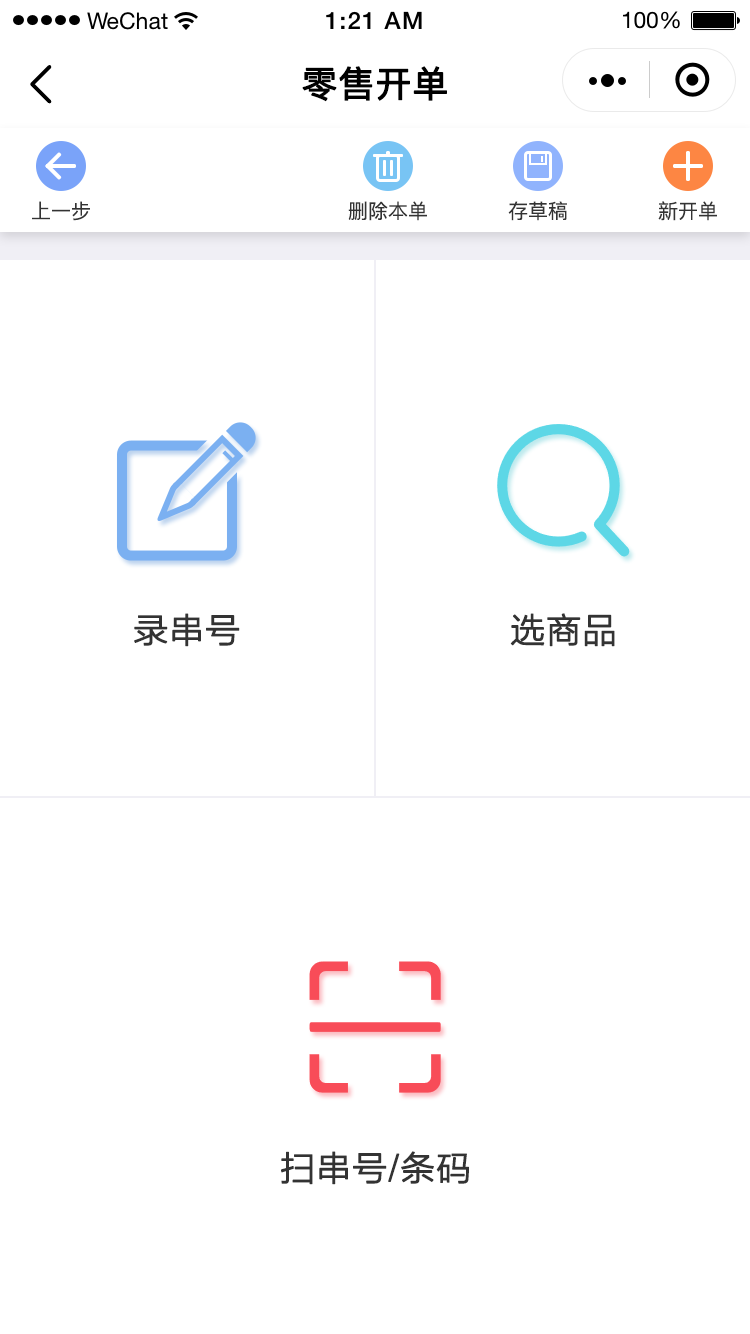
<style>
.page{position:relative;width:750px;height:1334px;background:#ffffff}
.page>*{position:absolute;margin:0}
.t1{font:36px "PingFang-SC-Medium";color:#000000;font-weight:bold}
.t2{font:20px "PingFang-SC-Medium";color:#333333}
.t3{font:34px "STHeitiSC-Medium";color:#333333;font-weight:bold}
</style>
<div class="page">
<p class="t1" style="left:302px;top:66px;width:145px;height:36px">零售开单</p>
<p class="t2" style="left:32px;top:201px;width:58px;height:20px">上一步</p>
<p class="t2" style="left:348px;top:201px;width:79px;height:20px">删除本单</p>
<p class="t2" style="left:508px;top:201px;width:59px;height:20px">存草稿</p>
<p class="t2" style="left:658px;top:201px;width:59px;height:20px">新开单</p>
<p class="t3" style="left:134px;top:613px;width:106px;height:34px">录串号</p>
<p class="t3" style="left:510px;top:613px;width:105px;height:34px">选商品</p>
<p class="t3" style="left:281px;top:1151px;width:188px;height:34px">扫串号/条码</p>
</div>
